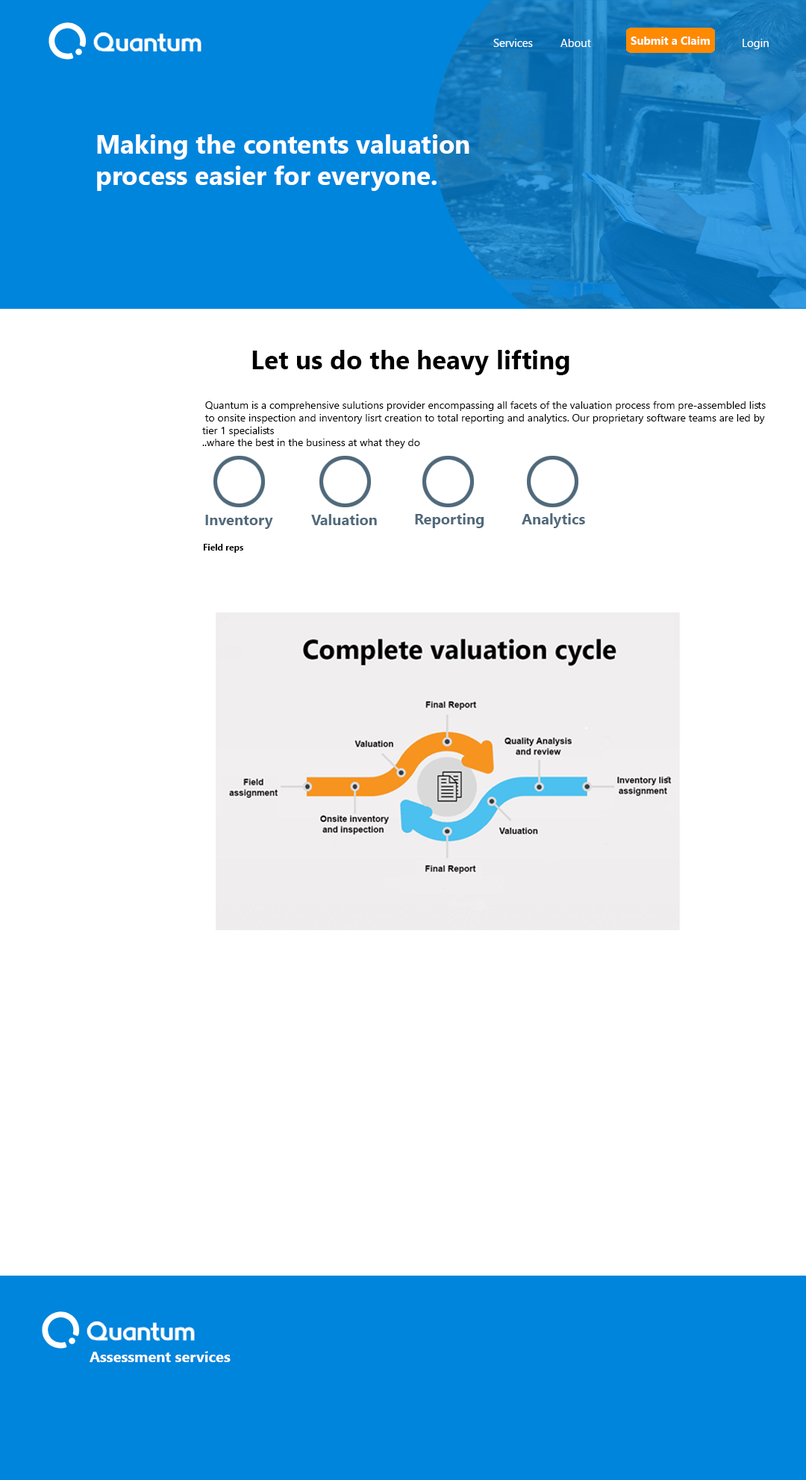
<style>
.page{position:relative;width:806px;height:1480px;background:#ffffff}
.page>*{position:absolute;margin:0}
.t1{font:11.2px "SegoeUI";color:#ffffff}
.t2{font:11.2px "SegoeUI-Bold";color:#ffffff}
.t3{font:26.1px "SegoeUI-Bold";color:#ffffff}
.t4{font:26.1px "SegoeUI-Bold";color:#000000}
.t5{font:10.4px "SegoeUI";color:#000000}
.t6{font:14.9px "SegoeUI-Bold";color:#50697a}
.t7{font:9px "SegoeUI-Bold";color:#000000}
.t8{font:14.9px "SegoeUI-Bold";color:#ffffff}
</style>
<div class="page">
<p class="t1" style="left:493px;top:39px;width:40px;height:8px">Services</p>
<p class="t1" style="left:560px;top:39px;width:31px;height:8px">About</p>
<p class="t2" style="left:630px;top:37px;width:79px;height:8px">Submit a Claim</p>
<p class="t1" style="left:742px;top:39px;width:26px;height:10px">Login</p>
<p class="t3" style="left:97px;top:134px;width:372px;height:57px;text-align:right">Making the contents valuation<br>process easier for everyone.</p>
<p class="t4" style="left:252px;top:350px;width:317px;height:25px">Let us do the heavy lifting</p>
<p class="t5" style="left:202px;top:401px;width:563px;height:47px;text-align:right">Quantum is a comprehensive sulutions provider encompassing all facets of the valuation process from pre-assembled lists <br>to onsite inspection and inventory lisrt creation to total reporting and analytics. Our proprietary software teams are led by <br>tier 1 specialists<br>whare the best in the business at what they do..</p>
<p class="t6" style="left:205px;top:515px;width:68px;height:14px">Inventory</p>
<p class="t6" style="left:311px;top:514px;width:66px;height:11px">Valuation</p>
<p class="t6" style="left:415px;top:513px;width:69px;height:15px">Reporting</p>
<p class="t6" style="left:521px;top:513px;width:64px;height:15px">Analytics</p>
<p class="t7" style="left:203px;top:544px;width:40px;height:9px">Field reps</p>
<p class="t8" style="left:90px;top:1351px;width:141px;height:11px">Assessment services</p>
</div>
